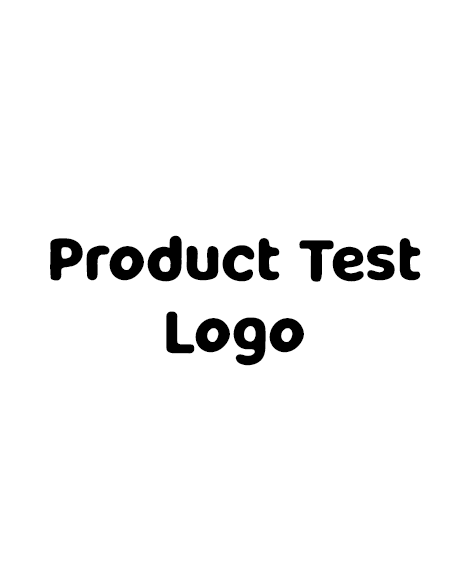
<style>
.page{position:relative;width:470px;height:570px;background:#ffffff}
.page>*{position:absolute;margin:0}
.t1{font:60.3px "MilkyNiceClean";color:#000000}
</style>
<div class="page">
<p class="t1" style="left:50px;top:235px;width:371px;height:131px;text-align:center">Product Test<br>Logo</p>
</div>
